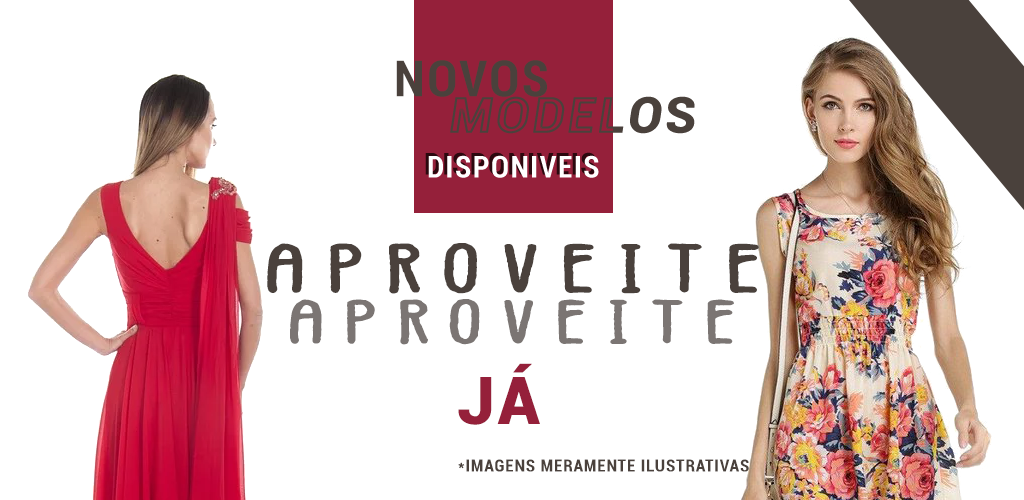
<style>
.page{position:relative;width:1024px;height:500px;background:#ffffff}
.page>*{position:absolute;margin:0}
.t1{font:50px "Roboto-BoldCondensed";letter-spacing:0.05em;color:#4a413c}
.t2{font:70.1px "Vintages";letter-spacing:0.21em;color:#4a413c;scale:1.53 1}
.t3{font:62.9px "Vintages";letter-spacing:0.21em;color:#7b7573;scale:1.54 1}
.t4{font:66px "Roboto-Black";letter-spacing:0.05em;color:#95203a}
.t5{font:16.9px "Roboto-BoldCondensed";letter-spacing:0.05em;color:#4a413c}
</style>
<div class="page">
<p class="t1" style="left:396px;top:60px;width:151px;height:37px">NOVOS</p>
<p class="t2" style="left:267px;top:243px;width:492px;height:51px">APROVEITE</p>
<p class="t3" style="left:290px;top:299px;width:444px;height:46px">APROVEITE</p>
<p class="t4" style="left:458px;top:363px;width:82px;height:62px">JÁ</p>
<p class="t5" style="left:458px;top:459px;width:291px;height:13px">*IMAGENS MERAMENTE ILUSTRATIVAS</p>
</div>
